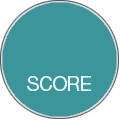
<style>
.page{position:relative;width:120px;height:120px;background:#3d959c}
.page>*{position:absolute;margin:0}
.t1{font:20px "HelveticaNeueLTStd-Roman";letter-spacing:-0.04em;color:#eaffff}
</style>
<div class="page">
<p class="t1" style="left:27px;top:76px;width:64px;height:15px">SCORE</p>
</div>
